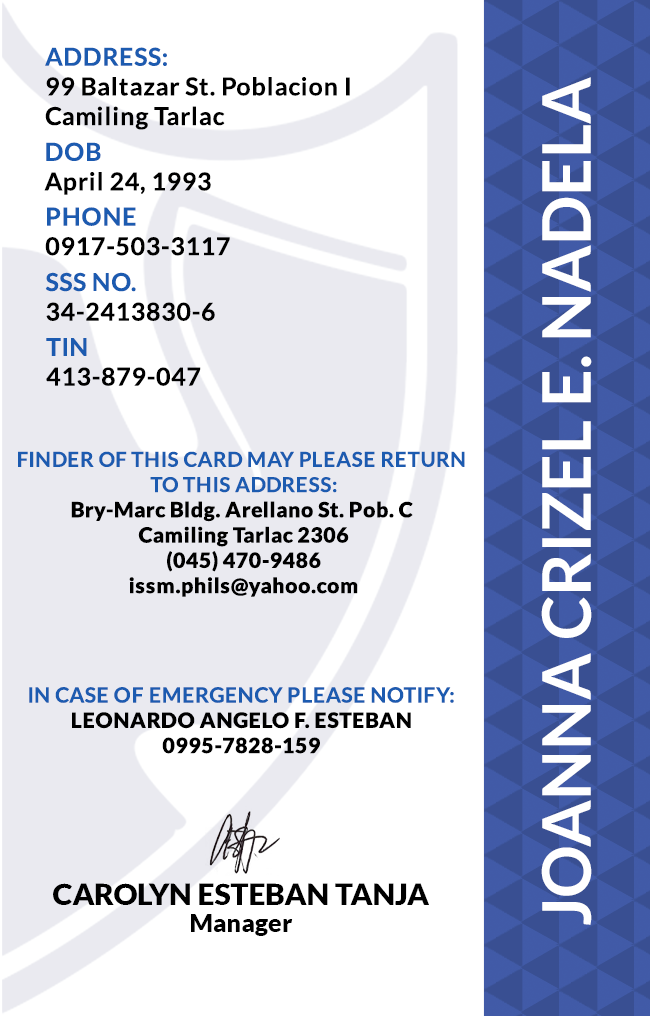
<style>
.page{position:relative;width:650px;height:1016px;background:#ffffff}
.page>*{position:absolute;margin:0}
.t1{font:24.7px/29.6px "Lato-Bold";letter-spacing:0.025em;color:#000000}
.t2{font:24.7px/29.6px "Lato-Bold";letter-spacing:0.025em;color:#1c5bb0}
.t3{font:66.7px "Lato-Bold";color:#ffffff}
.t4{font:24.7px/29.6px "Lato-Bold";letter-spacing:0.025em}
.t5{font:21.1px "Lato-Black";letter-spacing:0.025em}
.t6{font:20.5px/25.3px "Lato-Bold";letter-spacing:0.025em;text-transform:uppercase}
.t7{font:21.1px/25.3px "Lato-Bold";letter-spacing:0.025em}
.t8{font:29.5px "Lato-Black";color:#000000}
.t9{font:25px "Lato-Black";color:#000000}
</style>
<div class="page">
<p class="t1" style="left:45px;top:47px;width:305px;height:83px"><span class="t2">ADDRESS:<br></span>99 Baltazar St. Poblacion I <br>Camiling Tarlac</p>
<p class="t3" style="left:541px;top:77px;width:51px;height:848px;rotate:-90deg">JOANNA CRIZEL E. NADELA</p>
<p class="t4" style="left:44px;top:142px;width:167px;height:53px">DOB<br>April 24, 1993</p>
<p class="t4" style="left:45px;top:207px;width:185px;height:49px">PHONE <br>0917-503-3117</p>
<p class="t4" style="left:45px;top:272px;width:170px;height:49px">SSS NO.<br>34-2413830-6</p>
<p class="t1" style="left:46px;top:338px;width:155px;height:48px">TIN<br>413-879-047</p>
<p class="t5" style="left:18px;top:451px;width:447px;height:146px;text-align:center"><span class="t6">Finder of this card may please return <br>to this address:<br></span>Bry-Marc Bldg. Arellano St. Pob. C <br>Camiling Tarlac 2306<br>(045) 470-9486<br>issm.phils@yahoo.com</p>
<p class="t5" style="left:29px;top:687px;width:425px;height:67px;text-align:center"><span class="t7">IN CASE OF EMERGENCY PLEASE NOTIFY:<br></span>LEONARDO ANGELO F. ESTEBAN<br>0995-7828-159</p>
<p class="t8" style="left:53px;top:883px;width:376px;height:22px">CAROLYN ESTEBAN TANJA</p>
<p class="t9" style="left:191px;top:914px;width:102px;height:22px">Manager</p>
</div>
